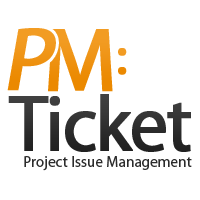
<style>
.page{position:relative;width:200px;height:200px;background:#ffffff}
.page>*{position:absolute;margin:0}
.t1{font:90px "MyriadPro-Regular";color:#f09517;font-weight:bold;font-style:italic}
.t2{font:90px "MyriadPro-Regular";color:#eb8900;font-weight:bold}
.t3{font:56.7px "MyriadPro-Regular";color:#ee9212;font-weight:bold}
.t4{font:79.5px "MyriadPro-Regular";letter-spacing:-0.04em;color:#2b2b2b;font-weight:bold;scale:0.95 1}
.t5{font:15.7px "MyriadPro-Regular";letter-spacing:0.01em;color:#2b2b2b;scale:0.95 1}
</style>
<div class="page">
<p class="t1" style="left:7px;top:28px;width:49px;height:63px">P</p>
<p class="t2" style="left:48px;top:29px;width:65px;height:63px">M</p>
<p class="t3" style="left:118px;top:48px;width:9px;height:27px">:</p>
<p class="t4" style="left:8px;top:94px;width:183px;height:58px">Ticket</p>
<p class="t5" style="left:24px;top:156px;width:168px;height:15px">Project Issue Management</p>
</div>
